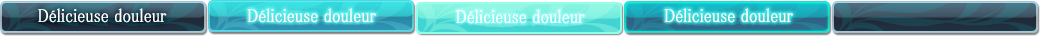
<style>
.page{position:relative;width:1040px;height:37px}
.page>*{position:absolute;margin:0}
.t1{font:19px "MS-PMincho";color:#ffffff;font-weight:bold;scale:0.84 1}
</style>
<div class="page">
<p class="t1" style="left:38px;top:8px;width:129px;height:15px">Délicieuse douleur</p>
<p class="t1" style="left:247px;top:8px;width:129px;height:15px">Délicieuse douleur</p>
<p class="t1" style="left:456px;top:9px;width:129px;height:15px;text-align:center">Délicieuse douleur<br>ouleur</p>
<p class="t1" style="left:664px;top:8px;width:129px;height:15px">Délicieuse douleur</p>
</div>
